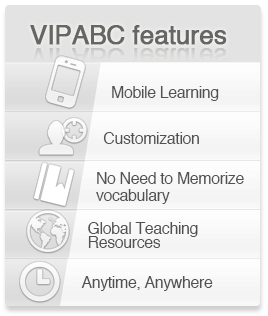
<style>
.page{position:relative;width:268px;height:316px}
.page>*{position:absolute;margin:0}
.t1{font:26px "Helvetica";letter-spacing:-0.025em;color:#666666;font-weight:bold}
.t2{font:26px "Helvetica";letter-spacing:-0.025em;color:#dbdbdb;font-weight:bold}
.t3{font:16px "Helvetica";letter-spacing:-0.025em;color:#515151}
.t4{font:16px/17px "Helvetica";letter-spacing:-0.025em;color:#515151}
.t5{font:16px/14px "Helvetica";letter-spacing:-0.025em;color:#515151}
</style>
<div class="page">
<p class="t1" style="left:30px;top:25px;width:197px;height:20px">VIPABC features</p>
<p class="t2" style="left:30px;top:48px;width:197px;height:20px">VIPABC features</p>
<p class="t3" style="left:112px;top:86px;width:107px;height:15px">Mobile Learning</p>
<p class="t3" style="left:103px;top:132px;width:96px;height:12px">Customization</p>
<p class="t4" style="left:96px;top:172px;width:148px;height:32px">No Need to Memorize <br>vocabulary</p>
<p class="t5" style="left:88px;top:222px;width:110px;height:26px">Global Teaching <br>Resources</p>
<p class="t3" style="left:81px;top:276px;width:132px;height:15px">Anytime, Anywhere</p>
</div>
